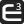
<style>
.page{position:relative;width:24px;height:24px;background:#252525}
.page>*{position:absolute;margin:0}
.t1{font:28.2px "Neuropol";color:#fbfbfb}
.t2{font:10.6px "Calibri"}
</style>
<div class="page">
<p class="t1" style="left:2px;top:4px;width:20px;height:17px">E</p>
<p class="t2" style="left:16px;top:3px;width:5px;height:7px">3</p>
</div>
